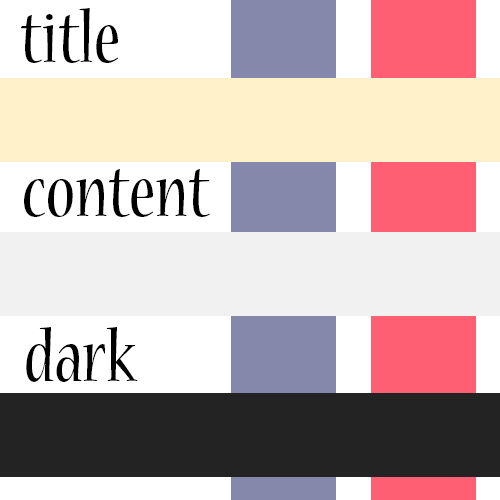
<style>
.page{position:relative;width:500px;height:500px;background:#ffffff}
.page>*{position:absolute;margin:0}
.t1{font:80px "NuevaStd-Cond";color:#000000}
</style>
<div class="page">
<p class="t1" style="left:21px;top:8px;width:97px;height:55px">title</p>
<p class="t1" style="left:24px;top:168px;width:186px;height:49px">content</p>
<p class="t1" style="left:26px;top:327px;width:112px;height:55px">dark</p>
</div>
